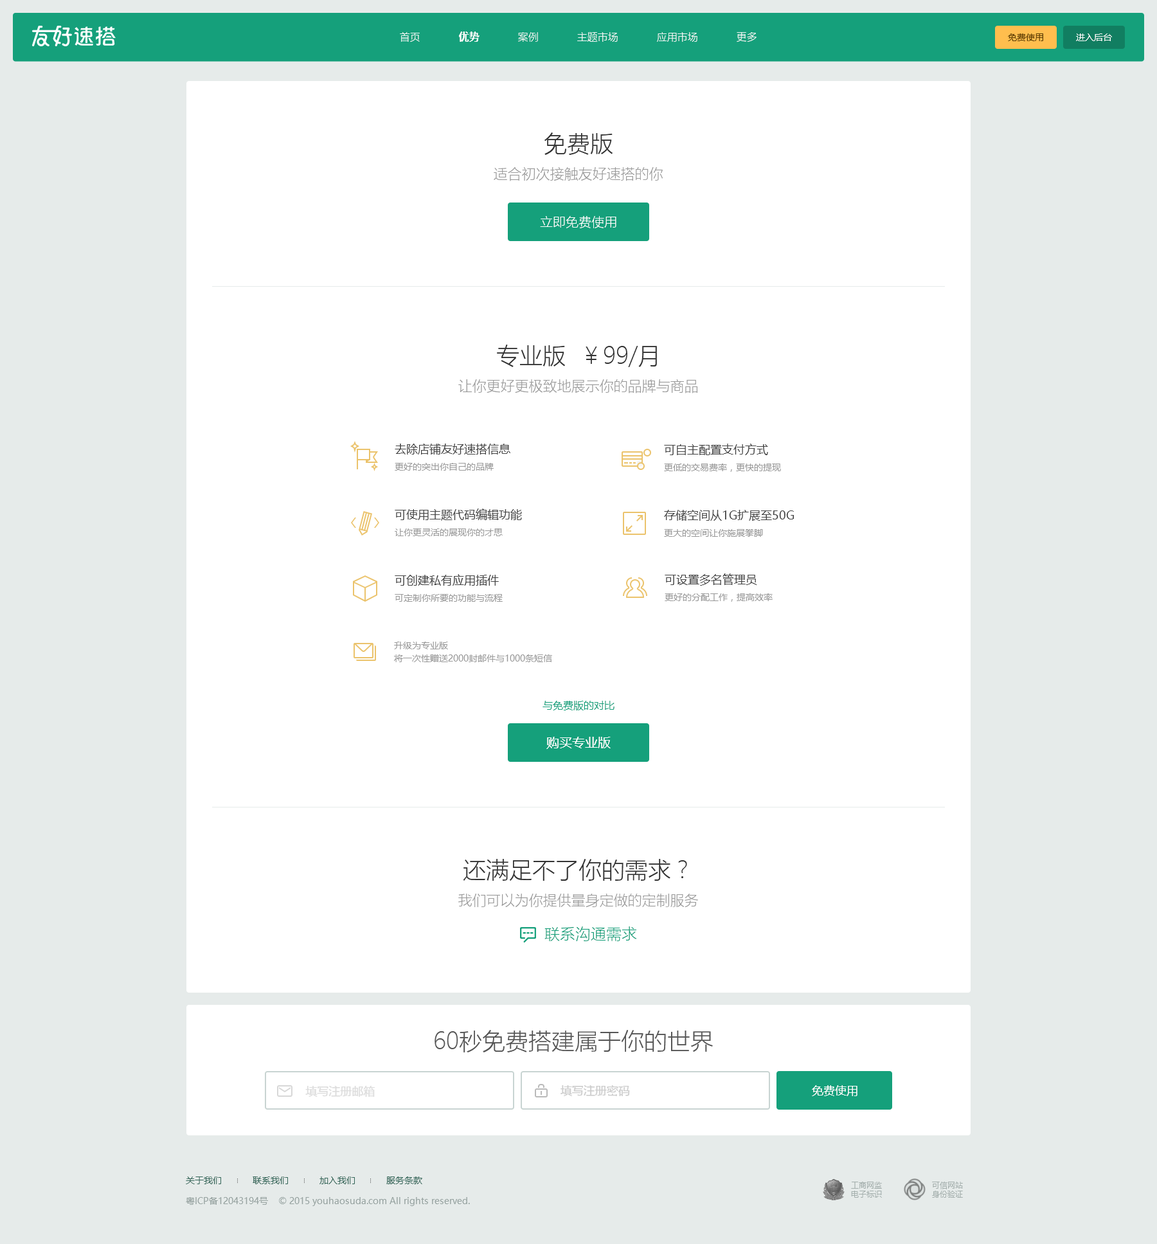
<style>
.page{position:relative;width:1157px;height:1244px;background:#ffffff}
.page>*{position:absolute;margin:0}
.t1{font:10.3px "MicrosoftYaHeiLight";color:#fefefe}
.t2{font:10.3px "MicrosoftYaHei-Bold";color:#fefefe}
.t3{font:9px "MicrosoftYaHei";color:#593900}
.t4{font:9px "MicrosoftYaHei";color:#ffffff}
.t5{font:14.1px/27px "MicrosoftYaHeiLight";color:#999999}
.t6{font:23.1px/27px "MicrosoftYaHeiLight";color:#333333}
.t7{font:12.9px "MicrosoftYaHeiLight";color:#ffffff}
.t8{font:9px/16.7px "MicrosoftYaHei";color:#999999}
.t9{font:11.6px/16.7px "MicrosoftYaHei";color:#444444}
.t10{font:9px/12.9px "MicrosoftYaHei";color:#999999}
.t11{font:10.3px "MicrosoftYaHei";color:#15a07b}
.t12{font:12.9px "MicrosoftYaHei";color:#ffffff}
.t13{font:15.4px "MicrosoftYaHeiLight";color:#15a07b}
.t14{font:23.1px "MicrosoftYaHeiLight";color:#555555}
.t15{font:11.6px "MicrosoftYaHei";color:#ffffff}
.t16{font:9px "MicrosoftYaHei";color:#336558}
.t17{font:7.7px/9px "MicrosoftYaHei";color:#a3aeac}
.t18{font:9px "MicrosoftYaHei";color:#97a3a1}
</style>
<div class="page">
<p class="t1" style="left:400px;top:32px;width:357px;height:10px">首页            <span class="t2">优势</span>            案例            主题市场            应用市场            更多</p>
<p class="t3" style="left:1008px;top:33px;width:35px;height:8px">免费使用</p>
<p class="t4" style="left:1076px;top:33px;width:36px;height:8px">进入后台</p>
<p class="t5" style="left:494px;top:132px;width:169px;height:49px;text-align:center"><span class="t6">免费版</span><br>适合初次接触友好速搭的你</p>
<p class="t7" style="left:540px;top:216px;width:76px;height:12px">立即免费使用</p>
<p class="t5" style="left:458px;top:345px;width:240px;height:48px;text-align:center"><span class="t6">专业版  ￥99/月<br></span>让你更好更极致地展示你的品牌与商品</p>
<p class="t8" style="left:395px;top:444px;width:115px;height:27px"><span class="t9">去除店铺友好速搭信息<br></span>更好的突出你自己的品牌</p>
<p class="t8" style="left:664px;top:444px;width:117px;height:28px"><span class="t9">可自主配置支付方式<br></span>更低的交易费率，更快的提现</p>
<p class="t8" style="left:395px;top:509px;width:127px;height:27px"><span class="t9">可使用主题代码编辑功能<br></span>让你更灵活的展现你的才思</p>
<p class="t9" style="left:664px;top:510px;width:130px;height:27px">存储空间从1G扩展至50G<br><span class="t8">更大的空间让你施展拳脚</span></p>
<p class="t8" style="left:395px;top:574px;width:108px;height:28px"><span class="t9">可创建私有应用插件<br></span>可定制你所要的功能与流程</p>
<p class="t8" style="left:665px;top:573px;width:108px;height:29px"><span class="t9">可设置多名管理员<br></span>更好的分配工作，提高效率</p>
<p class="t10" style="left:394px;top:642px;width:158px;height:20px">升级为专业版<br>将一次性赠送2000封邮件与1000条短信</p>
<p class="t11" style="left:543px;top:701px;width:72px;height:9px">与免费版的对比</p>
<p class="t12" style="left:546px;top:737px;width:65px;height:12px">购买专业版</p>
<p class="t5" style="left:458px;top:859px;width:240px;height:48px;text-align:center"><span class="t6">还满足不了你的需求？<br></span>我们可以为你提供量身定做的定制服务</p>
<p class="t13" style="left:544px;top:926px;width:93px;height:15px">联系沟通需求</p>
<p class="t14" style="left:435px;top:1030px;width:278px;height:22px">60秒免费搭建属于你的世界</p>
<p class="t15" style="left:812px;top:1085px;width:46px;height:11px">免费使用</p>
<p class="t16" style="left:186px;top:1176px;width:236px;height:8px">关于我们            联系我们            加入我们            服务条款</p>
<p class="t17" style="left:851px;top:1182px;width:31px;height:16px;text-align:center">工商网监<br>电子标识</p>
<p class="t17" style="left:932px;top:1182px;width:31px;height:16px;text-align:center">可信网站<br>身份验证</p>
<p class="t18" style="left:186px;top:1197px;width:284px;height:9px">粤ICP备12043194号    © 2015 youhaosuda.com All rights reserved.</p>
</div>
